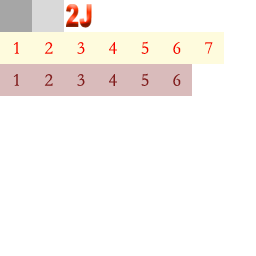
<style>
.page{position:relative;width:256px;height:256px;background:#ffffff}
.page>*{position:absolute;margin:0}
.t1{font:18px "STFangsong";color:#f60000}
.t2{font:18px "STFangsong";color:#f6140d}
</style>
<div class="page">
<p class="t1" style="left:141px;top:41px;width:8px;height:13px">5</p>
<p class="t2" style="left:13px;top:42px;width:6px;height:12px">1</p>
<p class="t1" style="left:44px;top:42px;width:9px;height:12px">2</p>
<p class="t1" style="left:77px;top:42px;width:8px;height:12px">3</p>
<p class="t1" style="left:109px;top:42px;width:8px;height:12px">4</p>
<p class="t1" style="left:173px;top:42px;width:8px;height:12px">6</p>
<p class="t1" style="left:205px;top:42px;width:8px;height:12px">7</p>
</div>
